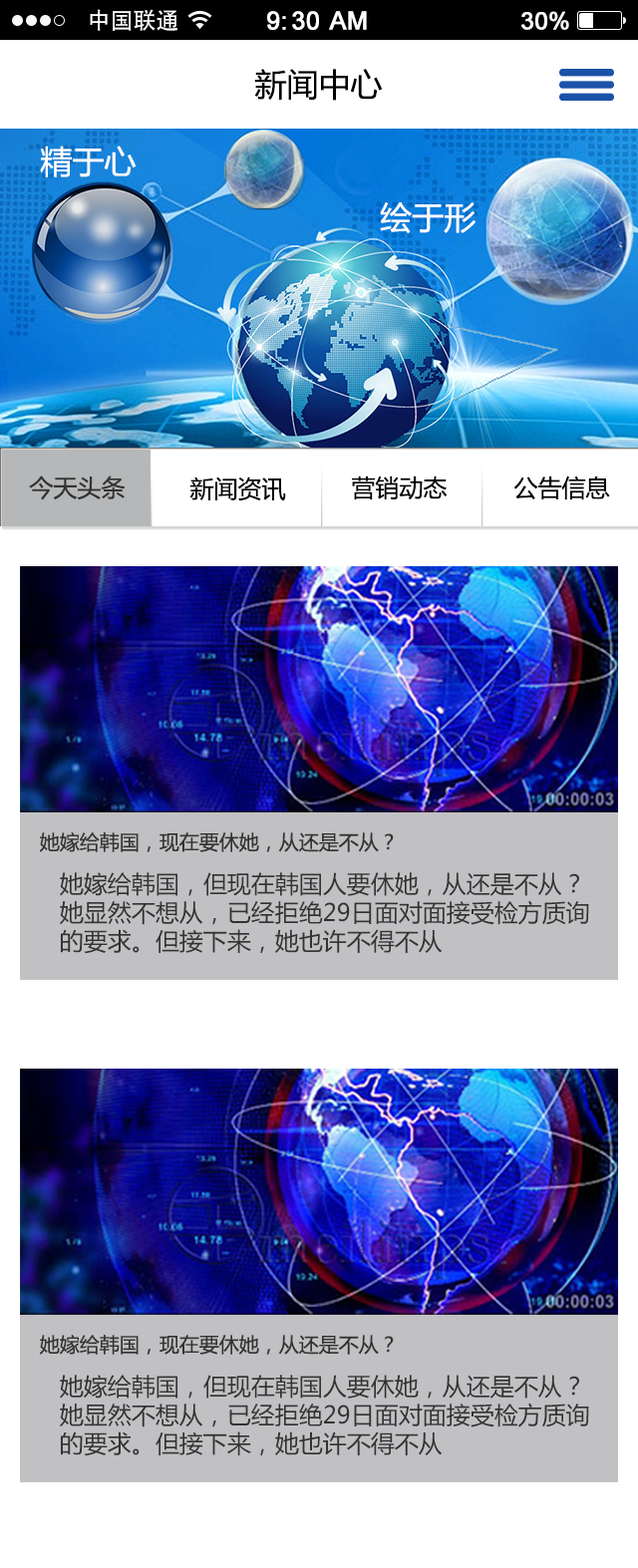
<style>
.page{position:relative;width:638px;height:1568px;background:#ffffff}
.page>*{position:absolute;margin:0}
.t1{font:22.9px "AdobeHeitiStd-Regular";color:#ffffff}
.t2{font:24.9px "ArialMT";color:#ffffff;font-weight:bold}
.t3{font:23.9px "ArialMT";color:#ffffff;font-weight:bold}
.t4{font:31.9px "MicrosoftYaHei";color:#000000}
.t5{font:23.9px "MicrosoftYaHei";color:#333333}
.t6{font:23.9px "MicrosoftYaHei";color:#000000}
.t7{font:19.9px "MicrosoftYaHei";color:#333333}
</style>
<div class="page">
<p class="t1" style="left:90px;top:9px;width:87px;height:22px">中国联通</p>
<p class="t1" style="left:90px;top:9px;width:87px;height:22px">中国联通</p>
<p class="t2" style="left:267px;top:11px;width:100px;height:19px">9:30 AM</p>
<p class="t2" style="left:267px;top:11px;width:100px;height:19px">9:30 AM</p>
<p class="t3" style="left:521px;top:11px;width:48px;height:19px">30%</p>
<p class="t3" style="left:521px;top:11px;width:48px;height:19px">30%</p>
<p class="t4" style="left:254px;top:69px;width:129px;height:32px">新闻中心</p>
<p class="t5" style="left:29px;top:475px;width:97px;height:25px">今天头条</p>
<p class="t6" style="left:189px;top:476px;width:97px;height:25px">新闻资讯</p>
<p class="t6" style="left:352px;top:475px;width:96px;height:25px">营销动态</p>
<p class="t6" style="left:513px;top:475px;width:97px;height:25px">公告信息</p>
<p class="t7" style="left:39px;top:832px;width:355px;height:20px">她嫁给韩国，现在要休她，从还是不从？</p>
<p class="t5" style="left:60px;top:872px;width:529px;height:82px">她嫁给韩国，但现在韩国人要休她，从还是不从？<br>她显然不想从，已经拒绝29日面对面接受检方质询<br>的要求。但接下来，她也许不得不从</p>
<p class="t7" style="left:39px;top:1335px;width:355px;height:20px">她嫁给韩国，现在要休她，从还是不从？</p>
<p class="t5" style="left:60px;top:1375px;width:529px;height:81px">她嫁给韩国，但现在韩国人要休她，从还是不从？<br>她显然不想从，已经拒绝29日面对面接受检方质询<br>的要求。但接下来，她也许不得不从</p>
</div>
